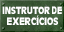
<style>
.page{position:relative;width:64px;height:32px}
.page>*{position:absolute;margin:0}
.t1{font:10.5px "CartesDisplaySSK";color:#ffffff;scale:0.91 1}
.t2{font:10.5px "CartesDisplaySSK";color:#ffffff;scale:0.86 1}
.t3{font:10.5px "CartesDisplaySSK";letter-spacing:0.02em;color:#ffffff;scale:0.73 1}
.t4{font:10.5px "ArialMT";scale:0.86 1}
</style>
<div class="page">
<p class="t1" style="left:2px;top:6px;width:60px;height:19px;text-align:center"><span class="t2">INSTRUTOR </span><span class="t3">D</span><span class="t2">E<br></span>EXERCICIOS</p>
<p class="t4" style="left:37px;top:15px;width:2px;height:2px">´</p>
</div>
